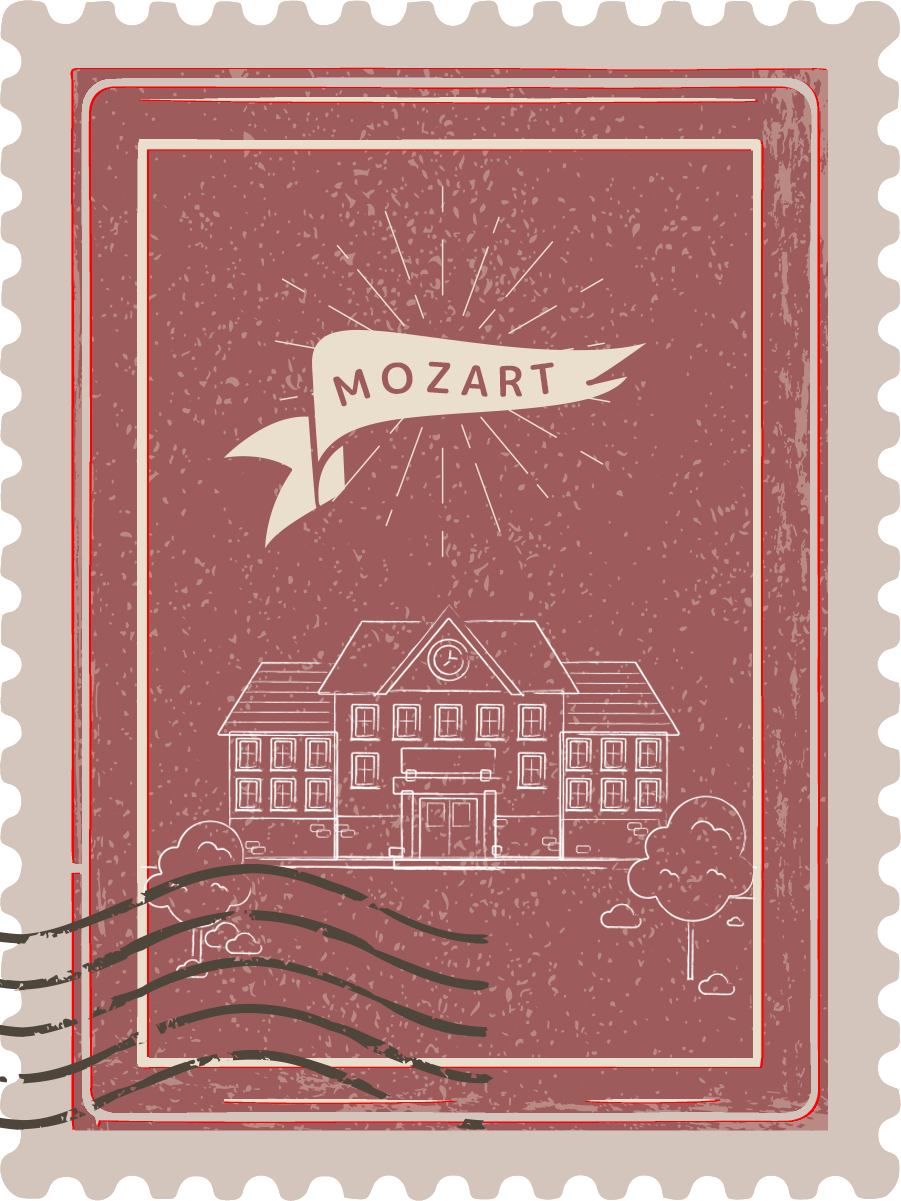
<style>
.page{position:relative;width:901px;height:1201px;background:#9e5b5b}
.page>*{position:absolute;margin:0}
.t1{font:42px "rounded-mplus-1p-bold";letter-spacing:0.2em;color:#9e5b5b}
</style>
<div class="page">
<p class="t1" style="left:333px;top:361px;width:221px;height:46px">MOZART</p>
</div>
